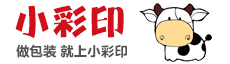
<style>
.page{position:relative;width:230px;height:64px;background:#ffffff}
.page>*{position:absolute;margin:0}
.t1{font:38px "FZTCGHJW--GB1-0";letter-spacing:-0.005em;color:#d0111b}
.t2{font:13.6px "FZLANTY_DAJW--GB1-0";letter-spacing:-0.005em;color:#555454}
</style>
<div class="page">
<p class="t1" style="left:15px;top:5px;width:109px;height:34px">小彩印</p>
<p class="t2" style="left:16px;top:44px;width:111px;height:14px">做包装 就上小彩印</p>
</div>
